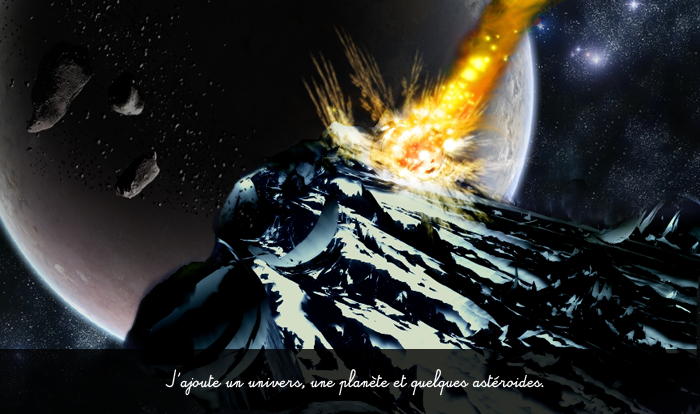
<style>
.page{position:relative;width:700px;height:414px}
.page>*{position:absolute;margin:0}
.t1{font:12px/20.5px "Alamain";color:#ffffff}
</style>
<div class="page">
<p class="t1" style="left:165px;top:369px;width:379px;height:27px">J'ajoute un univers, une planète et quelques astéroides.</p>
</div>
